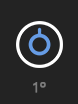
<style>
.page{position:relative;width:78px;height:104px;background:#232323}
.page>*{position:absolute;margin:0}
.t1{font:14px "SegoeUI";color:#7c7c7c;font-weight:bold}
</style>
<div class="page">
<p class="t1" style="left:33px;top:82px;width:13px;height:11px">1º</p>
</div>
